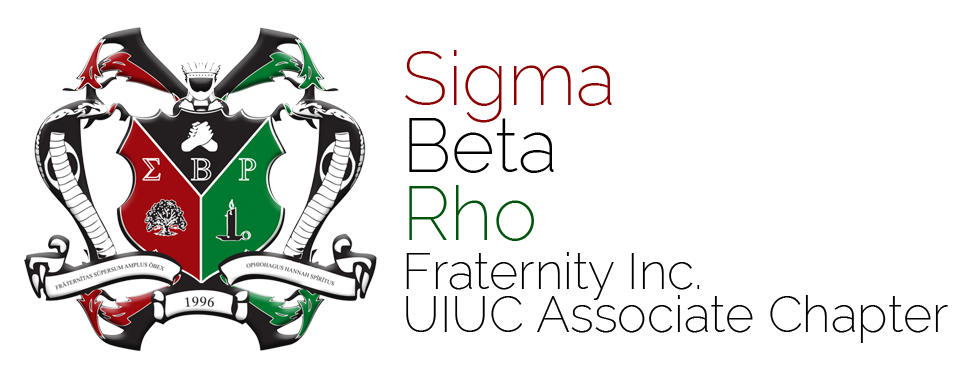
<style>
.page{position:relative;width:960px;height:390px;background:#ffffff}
.page>*{position:absolute;margin:0}
.t1{font:75px "Raleway-ExtraLight";color:#8e0000}
.t2{font:75px "Raleway-ExtraLight";color:#000000}
.t3{font:75px "Raleway-ExtraLight";color:#01540c}
.t4{font:50px "Raleway-ExtraLight";color:#000000}
.t5{font:12px "Raleway-ExtraLight";color:#000000}
</style>
<div class="page">
<p class="t1" style="left:405px;top:50px;width:207px;height:73px">Sigma</p>
<p class="t2" style="left:409px;top:118px;width:145px;height:55px">Beta</p>
<p class="t3" style="left:409px;top:185px;width:125px;height:56px">Rho</p>
<p class="t4" style="left:406px;top:252px;width:294px;height:48px">Fraternity Inc.</p>
<p class="t5" style="left:406px;top:295px;width:542px;height:48px">UIUC Associate Chapter</p>
</div>
